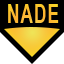
<style>
.page{position:relative;width:64px;height:64px;background:#000000}
.page>*{position:absolute;margin:0}
.t1{font:26.2px "ArialNarrow-Bold";letter-spacing:0.05em;color:#fbbd2e;scale:0.8 1}
</style>
<div class="page">
<p class="t1" style="left:8px;top:4px;width:51px;height:19px">NADE</p>
</div>
